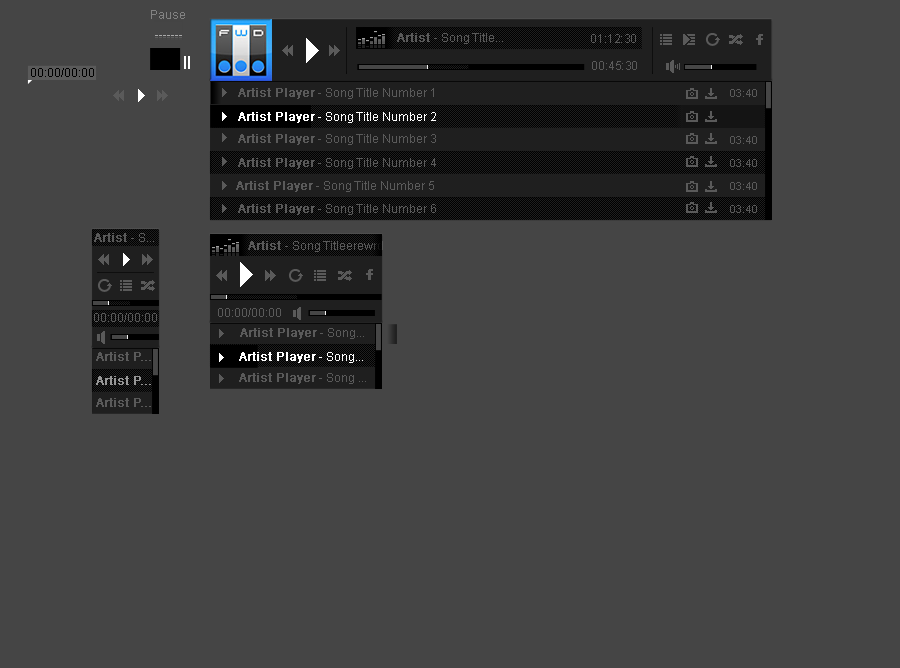
<style>
.page{position:relative;width:900px;height:668px;background:#454545}
.page>*{position:absolute;margin:0}
.t1{font:12px "ArialMT";color:#838383}
.t2{font:12px "ArialMT";color:#5a5a5a}
.t3{font:12px "ArialMT";color:#5a5a5a;font-weight:bold}
.t4{font:12px "ArialMT";color:#000000}
.t5{font:12px "ArialMT";letter-spacing:-0.02em;color:#000000}
.t6{font:11px "ArialMT";color:#5a5a5a}
.t7{font:12px "ArialMT";color:#ffffff}
.t8{font:12px "ArialMT";color:#ffffff;font-weight:bold}
.t9{font:12px "ArialMT";letter-spacing:-0.02em;color:#5a5a5a}
.t10{font:12px "ArialMT";color:#979797;font-weight:bold}
</style>
<div class="page">
<p class="t1" style="left:151px;top:10px;width:34px;height:9px">Pause</p>
<p class="t2" style="left:397px;top:33px;width:106px;height:11px"><span class="t3">Artist </span>- Song Title...</p>
<p class="t2" style="left:591px;top:34px;width:45px;height:9px">01:12:30</p>
<p class="t2" style="left:592px;top:61px;width:45px;height:9px">00:45:30</p>
<p class="t4" style="left:31px;top:68px;width:63px;height:9px">00:00<span class="t5">/</span>00:00</p>
<p class="t2" style="left:238px;top:88px;width:196px;height:11px"><span class="t3">Artist Player</span> - Song Title Number 1</p>
<p class="t6" style="left:730px;top:89px;width:27px;height:8px">03:40</p>
<p class="t7" style="left:238px;top:112px;width:198px;height:11px"><span class="t8">Artist Player</span> - Song Title Number 2</p>
<p class="t2" style="left:238px;top:134px;width:198px;height:11px"><span class="t3">Artist Player</span> - Song Title Number 3</p>
<p class="t6" style="left:730px;top:136px;width:27px;height:8px">03:40</p>
<p class="t2" style="left:238px;top:158px;width:198px;height:11px"><span class="t3">Artist Player</span> - Song Title Number 4</p>
<p class="t6" style="left:730px;top:159px;width:27px;height:8px">03:40</p>
<p class="t2" style="left:236px;top:181px;width:198px;height:11px"><span class="t3">Artist Player</span> - Song Title Number 5</p>
<p class="t6" style="left:730px;top:182px;width:27px;height:8px">03:40</p>
<p class="t2" style="left:238px;top:204px;width:198px;height:11px"><span class="t3">Artist Player</span> - Song Title Number 6</p>
<p class="t6" style="left:730px;top:205px;width:27px;height:8px">03:40</p>
<p class="t3" style="left:94px;top:233px;width:60px;height:9px">Artist <span class="t2">- S...</span></p>
<p class="t2" style="left:248px;top:241px;width:135px;height:11px"><span class="t3">Artist </span>- Song Titleerewrd</p>
<p class="t2" style="left:94px;top:313px;width:63px;height:9px">00:00<span class="t9">/</span>00:00</p>
<p class="t2" style="left:218px;top:308px;width:63px;height:9px">00:00<span class="t9">/</span>00:00</p>
<p class="t3" style="left:240px;top:328px;width:124px;height:11px">Artist Player<span class="t2"> - Song...</span></p>
<p class="t3" style="left:96px;top:352px;width:55px;height:9px">Artist P...</p>
<p class="t8" style="left:239px;top:352px;width:124px;height:11px">Artist Player<span class="t7"> - Song...</span></p>
<p class="t10" style="left:96px;top:376px;width:55px;height:9px">Artist P...</p>
<p class="t3" style="left:239px;top:373px;width:127px;height:11px">Artist Player<span class="t2"> - Song ...</span></p>
<p class="t3" style="left:96px;top:398px;width:55px;height:9px">Artist P...</p>
</div>
